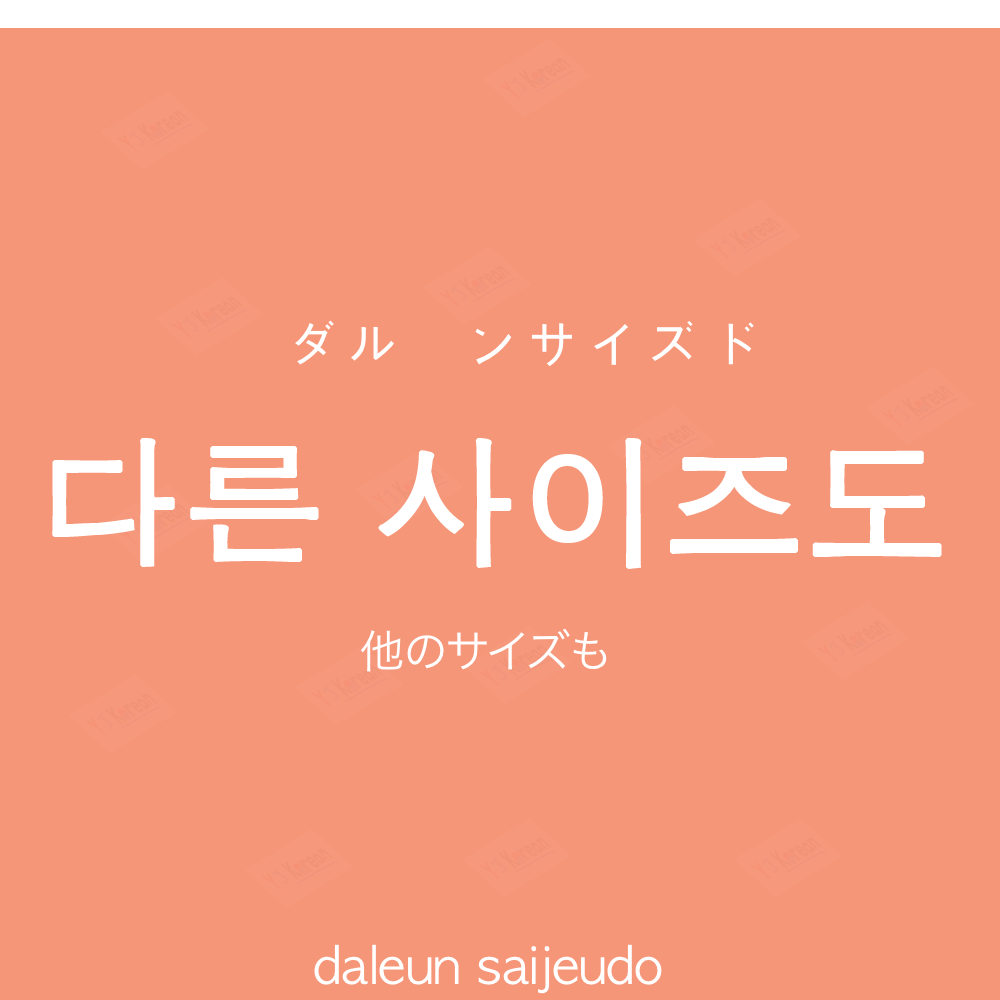
<style>
.page{position:relative;width:1000px;height:1000px;background:#f69679}
.page>*{position:absolute;margin:0}
.t1{font:60px "AppleGothic";color:#ffffff}
.t2{font:140px "AppleGothic";color:#ffffff;font-weight:bold}
.t3{font:45px "HiraKakuProN-W3";color:#ffffff}
.t4{font:50px "AppleGothic";color:#ffffff}
</style>
<div class="page">
<p class="t1" style="left:295px;top:320px;width:459px;height:47px">ダル　ンサイズド</p>
<p class="t2" style="left:52px;top:438px;width:890px;height:131px">다른 사이즈도</p>
<p class="t3" style="left:361px;top:628px;width:246px;height:44px">他のサイズも</p>
<p class="t4" style="left:314px;top:944px;width:348px;height:50px">daleun saijeudo</p>
</div>
